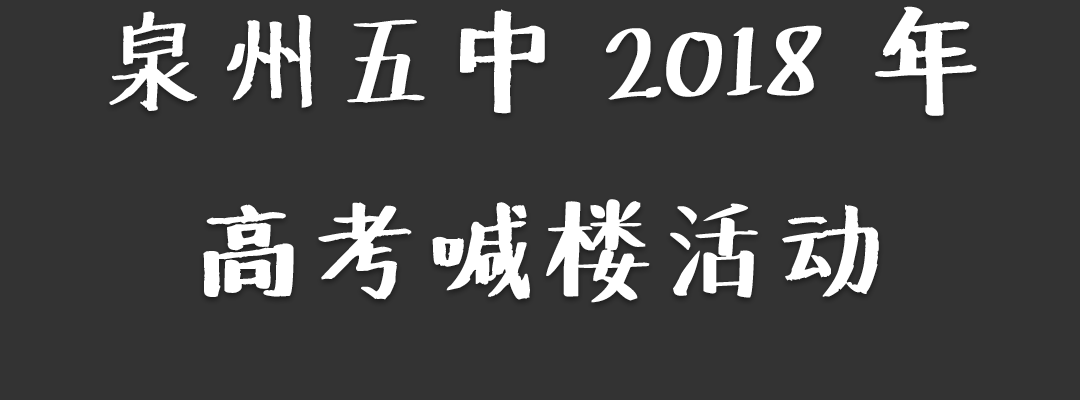
<style>
.page{position:relative;width:1080px;height:400px;background:#333333}
.page>*{position:absolute;margin:0}
.t1{font:108.3px "Undefined";color:#ffffff}
</style>
<div class="page">
<p class="t1" style="left:109px;top:6px;width:868px;height:297px;text-align:center">泉州五中 2018 年<br>高考喊楼活动</p>
</div>
